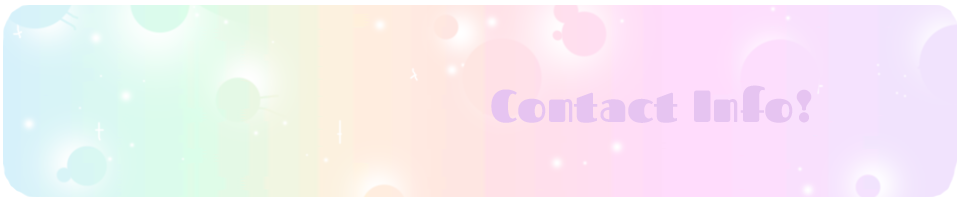
<style>
.page{position:relative;width:960px;height:200px}
.page>*{position:absolute;margin:0}
.t1{font:45px "Fascinate-Regular";color:#e6c4f1}
</style>
<div class="page">
<p class="t1" style="left:491px;top:85px;width:321px;height:38px">Contact Info!</p>
</div>
